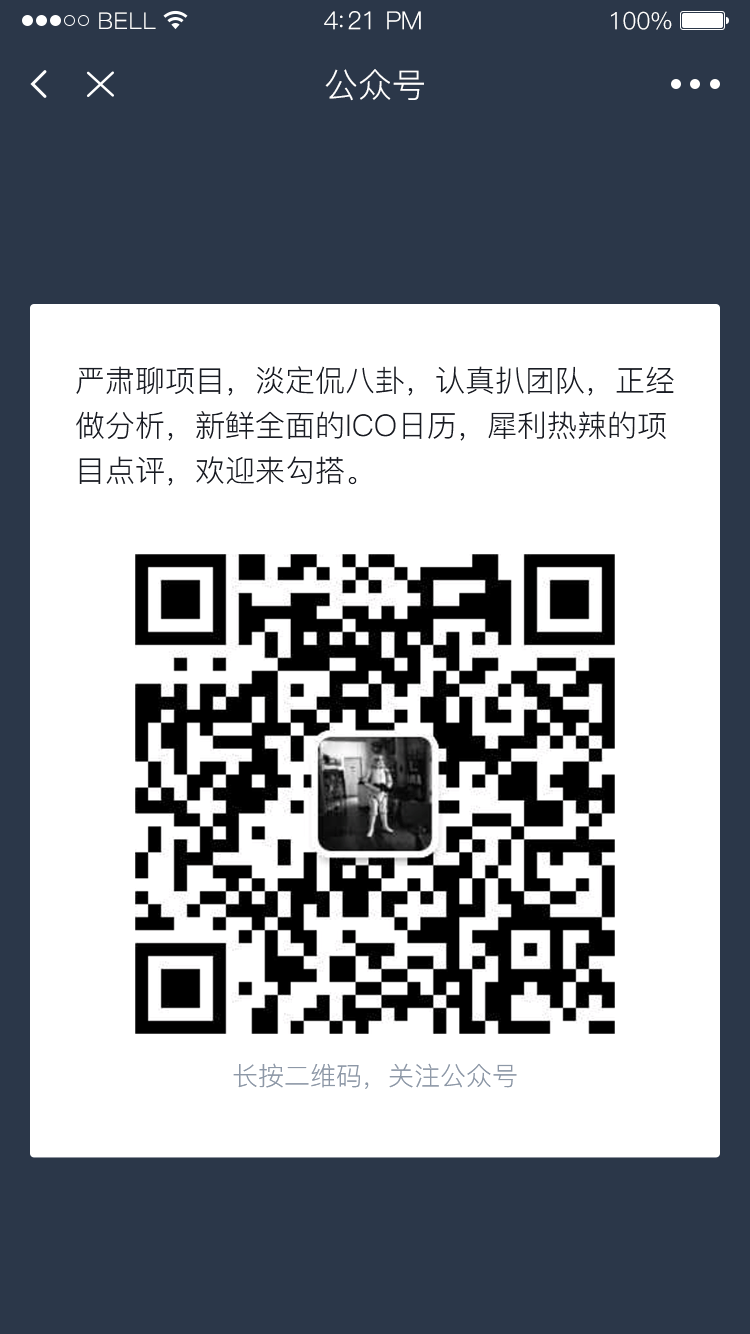
<style>
.page{position:relative;width:750px;height:1334px;background:#2b3749}
.page>*{position:absolute;margin:0}
.t1{font:23px "PingFang-SC-Regular";letter-spacing:0.02em;color:#ffffff}
.t2{font:25px "PingFang-SC-Regular";letter-spacing:-0.02em;color:#ffffff}
.t3{font:24px "PingFang-SC-Regular";letter-spacing:-0.02em;color:#ffffff}
.t4{font:34px "PingFang-SC-Regular";color:#ffffff}
.t5{font:30px/45px "PingFang-SC-Regular";color:#181b23}
.t6{font:26px "PingFang-SC-Regular";color:#8d98a7}
</style>
<div class="page">
<p class="t1" style="left:99px;top:12px;width:57px;height:17px">BELL</p>
<p class="t2" style="left:324px;top:11px;width:97px;height:19px">4:21 PM</p>
<p class="t3" style="left:611px;top:11px;width:61px;height:19px">100%</p>
<p class="t4" style="left:325px;top:69px;width:99px;height:32px">公众号</p>
<p class="t5" style="left:76px;top:366px;width:598px;height:120px">严肃聊项目，淡定侃八卦，认真扒团队，正经<br>做分析，新鲜全面的ICO日历，犀利热辣的项<br>目点评，欢迎来勾搭。</p>
<p class="t6" style="left:233px;top:1063px;width:284px;height:26px">长按二维码，关注公众号</p>
</div>
